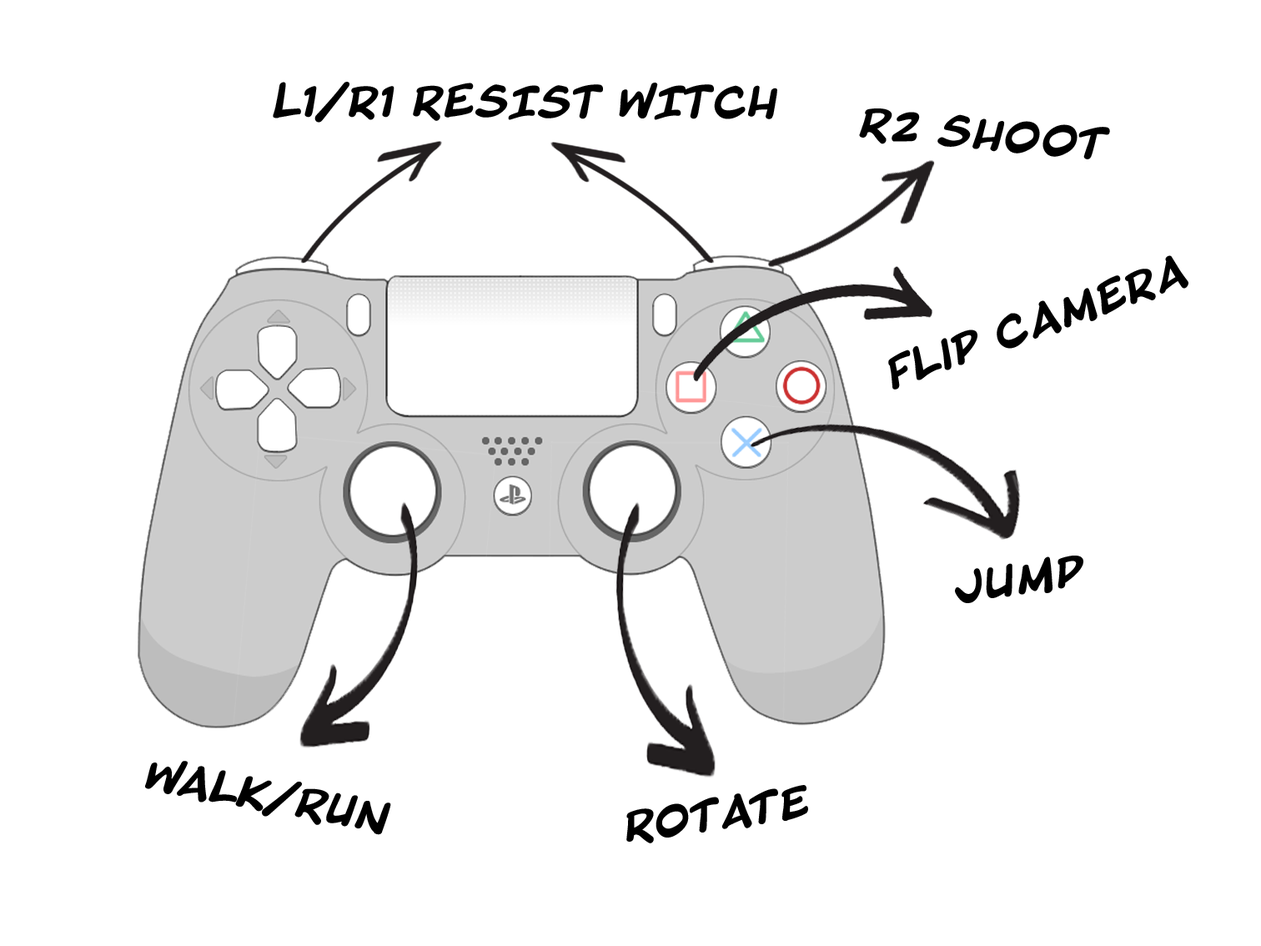
<style>
.page{position:relative;width:1261px;height:946px;background:#ffffff}
.page>*{position:absolute;margin:0}
.t1{font:33.4px "BlambotProBB-Bold";color:#000000}
</style>
<div class="page">
<p class="t1" style="left:273px;top:82px;width:504px;height:41px">L1/r1 RESIST WITCH</p>
<p class="t1" style="left:859px;top:108px;width:251px;height:51px;rotate:5deg">R2 Shoot</p>
<p class="t1" style="left:888px;top:255px;width:300px;height:134px;rotate:-20deg">Flip Camera</p>
<p class="t1" style="left:955px;top:555px;width:128px;height:48px;rotate:-8deg">JUMP</p>
<p class="t1" style="left:145px;top:761px;width:246px;height:74px;rotate:10deg">Walk/Run</p>
<p class="t1" style="left:626px;top:785px;width:182px;height:58px;rotate:-8deg">Rotate</p>
</div>
